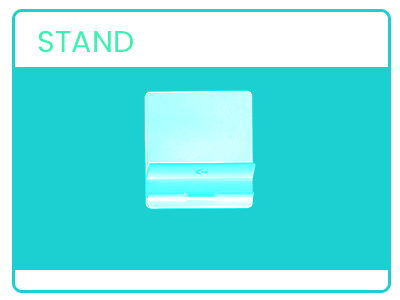
<style>
.page{position:relative;width:400px;height:300px;background:#1ccfd1}
.page>*{position:absolute;margin:0}
.t1{font:30px "Poppins-Regular";color:#3ff1b0}
</style>
<div class="page">
<p class="t1" style="left:38px;top:30px;width:95px;height:23px">STAND</p>
</div>
